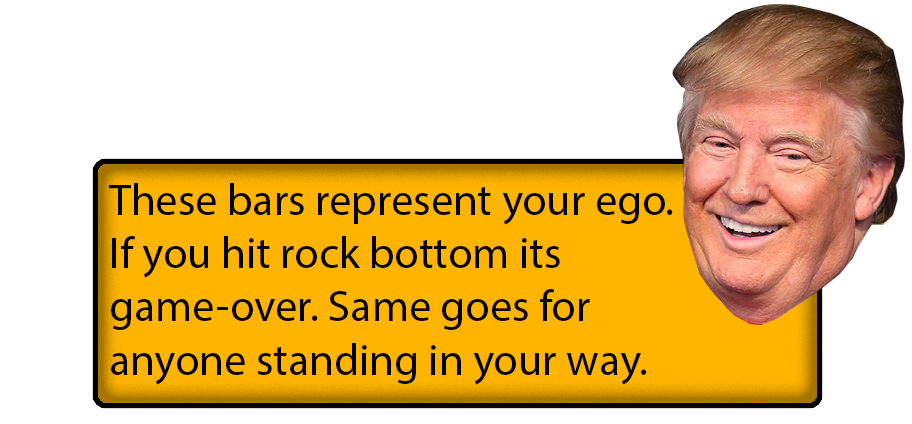
<style>
.page{position:relative;width:912px;height:424px;background:#ffffff}
.page>*{position:absolute;margin:0}
.t1{font:44.4px "MyriadPro-Regular";color:#000000}
</style>
<div class="page">
<p class="t1" style="left:109px;top:183px;width:564px;height:202px">These bars represent your ego.<br>If you hit rock bottom its <br>game-over. Same goes for <br>anyone standing in your way.</p>
</div>
